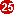
<style>
.page{position:relative;width:14px;height:14px;background:#cb0000}
.page>*{position:absolute;margin:0}
.t1{font:11px "Arial-BoldMT";color:#ffffff}
</style>
<div class="page">
<p class="t1" style="left:2px;top:3px;width:11px;height:8px">25</p>
</div>
